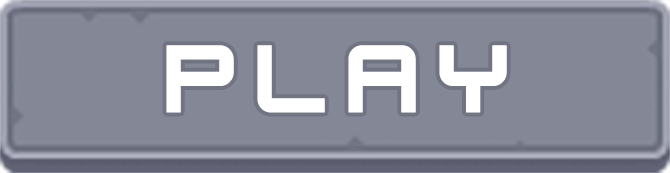
<style>
.page{position:relative;width:670px;height:173px;background:#838796}
.page>*{position:absolute;margin:0}
.t1{font:105.9px "KenVector-Future";color:#ffffff;font-weight:bold}
</style>
<div class="page">
<p class="t1" style="left:166px;top:45px;width:341px;height:68px">Play</p>
</div>
